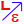
<style>
.page{position:relative;width:24px;height:24px;background:#ffffff}
.page>*{position:absolute;margin:0}
.t1{font:14px "CopperplateGothic-Bold";color:#ff0000}
</style>
<div class="page">
<p class="t1" style="left:1px;top:1px;width:10px;height:9px">L</p>
</div>
